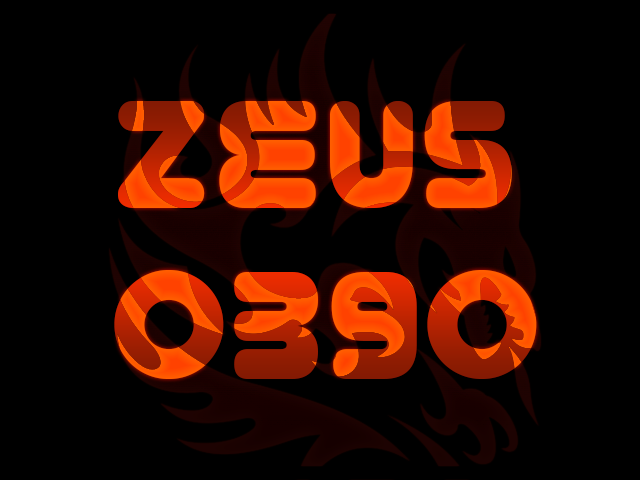
<style>
.page{position:relative;width:640px;height:480px;background:#000000}
.page>*{position:absolute;margin:0}
.t1{font:143px "YoureGone-Regular"}
</style>
<div class="page">
<p class="t1" style="left:114px;top:101px;width:423px;height:278px">Zeus<br>0390</p>
<p class="t1" style="left:114px;top:101px;width:423px;height:278px">Zeus<br>0390</p>
</div>
